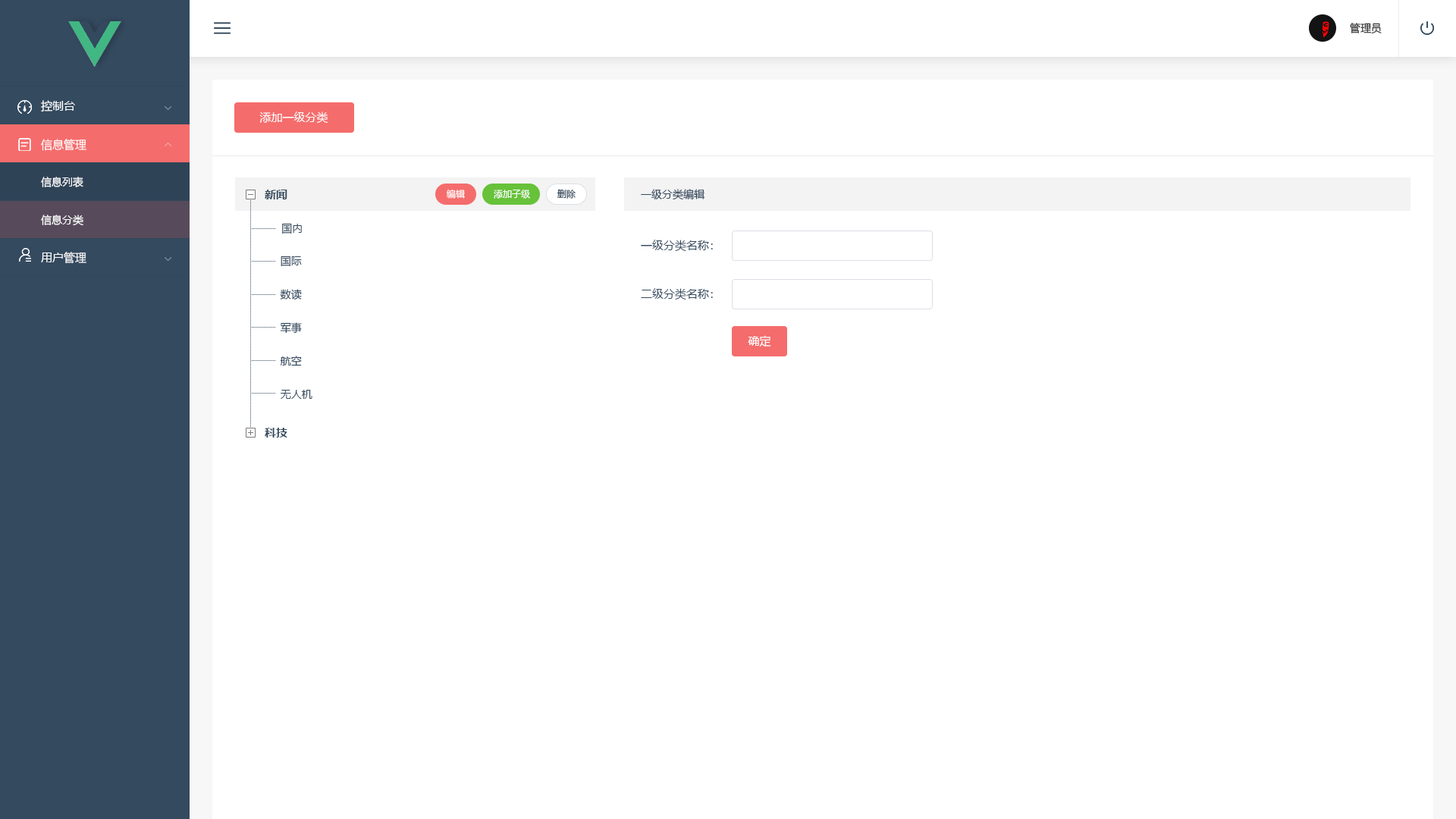
<style>
.page{position:relative;width:1456px;height:819px;background:#ffffff}
.page>*{position:absolute;margin:0}
.t1{font:10.6px "MicrosoftYaHei";color:#252525}
.t2{font:11.4px "MicrosoftYaHei";color:#ffffff}
.t3{font:10.6px/37.9px "MicrosoftYaHei";color:#ffffff}
.t4{font:11.4px/37.9px "MicrosoftYaHei";color:#ffffff}
.t5{font:10.6px/33.4px "MicrosoftYaHei";color:#344a5f}
.t6{font:11.4px/33.4px "MicrosoftYaHei-Bold";color:#344a5f}
.t7{font:9.1px "MicrosoftYaHei";color:#ffffff}
.t8{font:9.1px "MicrosoftYaHei";color:#344a5f}
.t9{font:10.6px "MicrosoftYaHei";color:#344a5f}
.t10{font:11.4px "MicrosoftYaHei";color:#344a5f}
.t11{font:11.4px "MicrosoftYaHei-Bold";color:#344a5f}
</style>
<div class="page">
<p class="t1" style="left:1350px;top:23px;width:32px;height:11px">管理员</p>
<p class="t2" style="left:41px;top:100px;width:34px;height:12px">控制台</p>
<p class="t2" style="left:259px;top:111px;width:69px;height:12px">添加一级分类</p>
<p class="t3" style="left:41px;top:139px;width:45px;height:87px"><span class="t4">信息管理<br></span>信息列表<br>信息分类</p>
<p class="t5" style="left:265px;top:190px;width:47px;height:209px"><span class="t6">新闻<br>     </span>国内<br>     国际<br>     数读<br>     军事<br>     航空<br>     无人机</p>
<p class="t7" style="left:446px;top:189px;width:19px;height:10px">编辑</p>
<p class="t7" style="left:494px;top:190px;width:36px;height:9px">添加子级</p>
<p class="t8" style="left:557px;top:190px;width:19px;height:9px">删除</p>
<p class="t9" style="left:641px;top:189px;width:64px;height:11px">一级分类编辑</p>
<p class="t10" style="left:641px;top:240px;width:72px;height:11px">一级分类名称：</p>
<p class="t2" style="left:41px;top:252px;width:45px;height:11px">用户管理</p>
<p class="t10" style="left:641px;top:288px;width:72px;height:12px">二级分类名称：</p>
<p class="t2" style="left:748px;top:335px;width:23px;height:12px">确定</p>
<p class="t11" style="left:265px;top:428px;width:22px;height:10px">科技</p>
</div>
